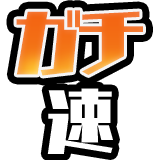
<style>
.page{position:relative;width:160px;height:160px;background:#ffffff}
.page>*{position:absolute;margin:0}
.t1{font:67.9px "CaratStd-UB";letter-spacing:-0.05em;color:#f37623}
.t2{font:67.9px "CaratStd-UB";letter-spacing:-0.05em;color:#ffffff}
</style>
<div class="page">
<p class="t1" style="left:16px;top:10px;width:127px;height:66px">ガチ</p>
<p class="t2" style="left:47px;top:88px;width:66px;height:66px">速</p>
</div>
